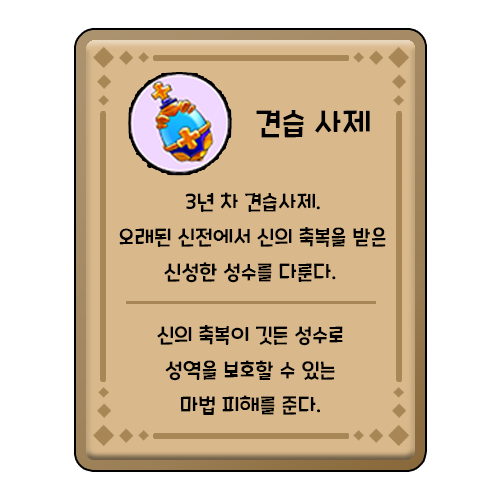
<style>
.page{position:relative;width:500px;height:500px;background:#d9b98c}
.page>*{position:absolute;margin:0}
.t1{font:30px "CookieRun-Regular";color:#000000}
.t2{font:20px "CookieRun-Regular";color:#000000}
</style>
<div class="page">
<p class="t1" style="left:256px;top:110px;width:114px;height:28px">견습 사제</p>
<p class="t2" style="left:119px;top:192px;width:267px;height:91px;text-align:center">3년 차 견습사제.<br>오래된 신전에서 신의 축복을 받은<br>신성한 성수를 다룬다.</p>
<p class="t2" style="left:157px;top:325px;width:186px;height:90px;text-align:center">신의 축복이 깃든 성수로<br>성역을 보호할 수 있는<br>마법 피해를 준다.</p>
</div>
